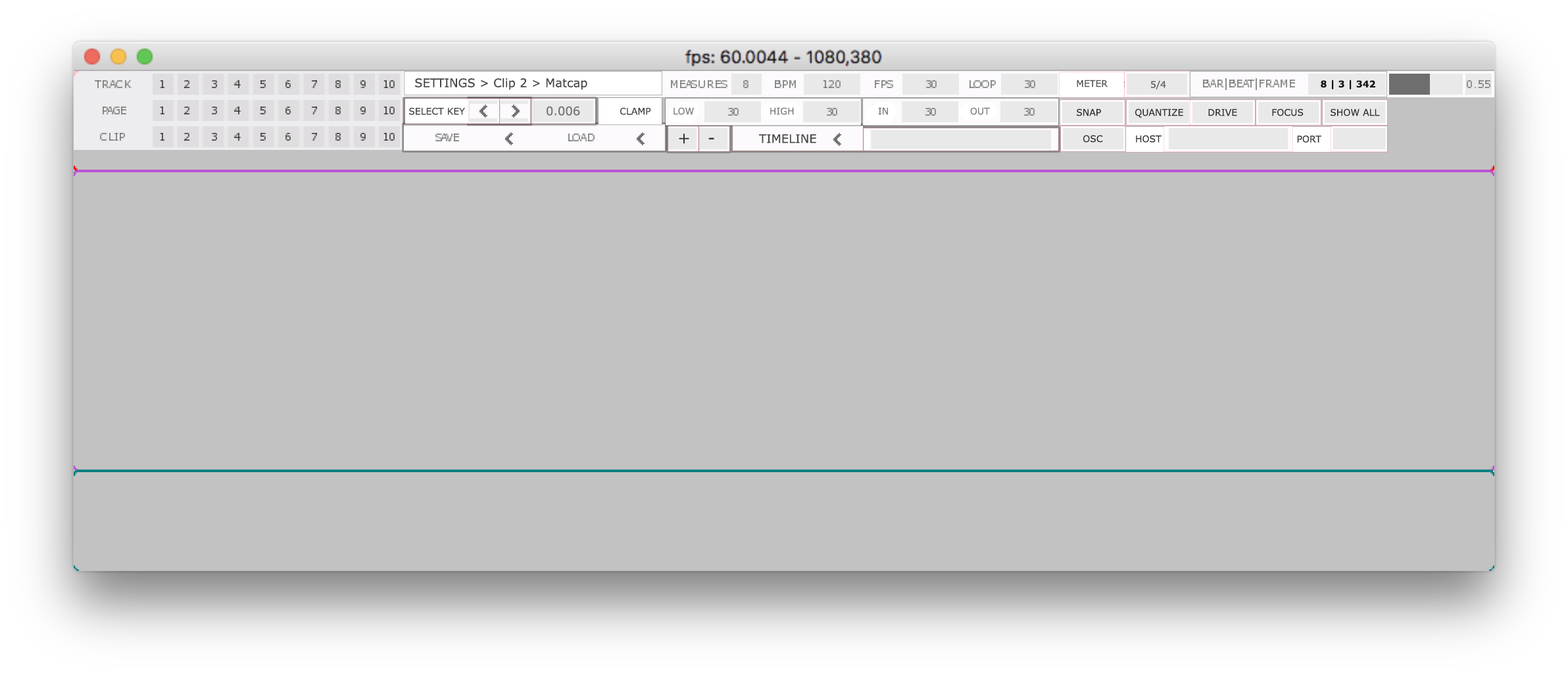
<style>
.page{position:relative;width:1568px;height:676px;background:#c2c2c2}
.page>*{position:absolute;margin:0}
.t1{font:11.8px "Verdana";color:#464646}
.t2{font:9.2px "Verdana";color:#555555}
.t3{font:9.2px "Verdana-Bold";color:#111111}
.t4{font:9.2px "Verdana";color:#464646}
.t5{font:11.8px "Verdana";color:#707070}
.t6{font:9.2px "Verdana";color:#817c7c}
.t7{font:9.2px "Verdana";color:#302f2f}
.t8{font:15.8px "Verdana";color:#363535}
</style>
<div class="page">
<p class="t1" style="left:415px;top:78px;width:172px;height:12px">SETTINGS &gt; Clip 2 &gt; Matcap</p>
<p class="t2" style="left:1077px;top:80px;width:31px;height:7px">METER</p>
<p class="t2" style="left:1151px;top:80px;width:15px;height:9px">5/4</p>
<p class="t3" style="left:1321px;top:80px;width:54px;height:9px">8 | 3 | 342</p>
<p class="t4" style="left:409px;top:107px;width:56px;height:8px">SELECT KEY</p>
<p class="t5" style="left:547px;top:106px;width:33px;height:10px">0.006</p>
<p class="t4" style="left:620px;top:107px;width:31px;height:8px">CLAMP</p>
<p class="t6" style="left:674px;top:107px;width:20px;height:8px">LOW</p>
<p class="t6" style="left:770px;top:107px;width:24px;height:8px">HIGH</p>
<p class="t6" style="left:878px;top:107px;width:10px;height:8px">IN</p>
<p class="t6" style="left:970px;top:107px;width:20px;height:8px">OUT</p>
<p class="t7" style="left:1077px;top:109px;width:24px;height:7px">SNAP</p>
<p class="t7" style="left:1135px;top:109px;width:48px;height:9px">QUANTIZE</p>
<p class="t7" style="left:1208px;top:109px;width:29px;height:7px">DRIVE</p>
<p class="t7" style="left:1272px;top:109px;width:32px;height:7px">FOCUS</p>
<p class="t7" style="left:1331px;top:109px;width:49px;height:7px">SHOW ALL</p>
<p class="t8" style="left:679px;top:134px;width:10px;height:10px">+</p>
<p class="t8" style="left:708px;top:137px;width:6px;height:2px">-</p>
<p class="t1" style="left:759px;top:134px;width:57px;height:9px">TIMELINE</p>
<p class="t7" style="left:1083px;top:135px;width:20px;height:8px">OSC</p>
<p class="t7" style="left:1136px;top:135px;width:26px;height:8px">HOST</p>
<p class="t7" style="left:1297px;top:135px;width:24px;height:8px">PORT</p>
</div>
